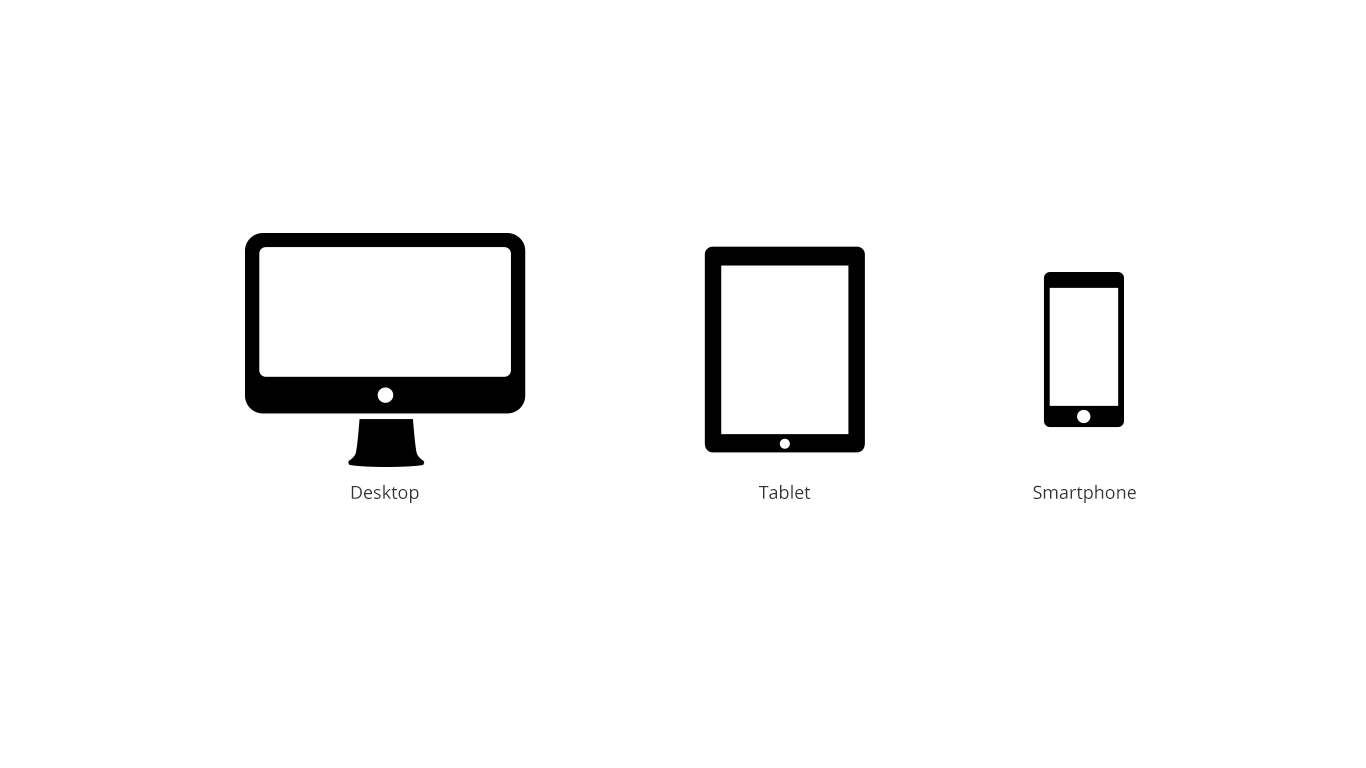
<style>
.page{position:relative;width:1366px;height:768px;background:#ffffff}
.page>*{position:absolute;margin:0}
.t1{font:18px "OpenSans";color:#333333}
</style>
<div class="page">
<p class="t1" style="left:351px;top:485px;width:68px;height:18px">Desktop</p>
<p class="t1" style="left:759px;top:485px;width:52px;height:14px">Tablet</p>
<p class="t1" style="left:1033px;top:485px;width:103px;height:18px">Smartphone</p>
</div>
